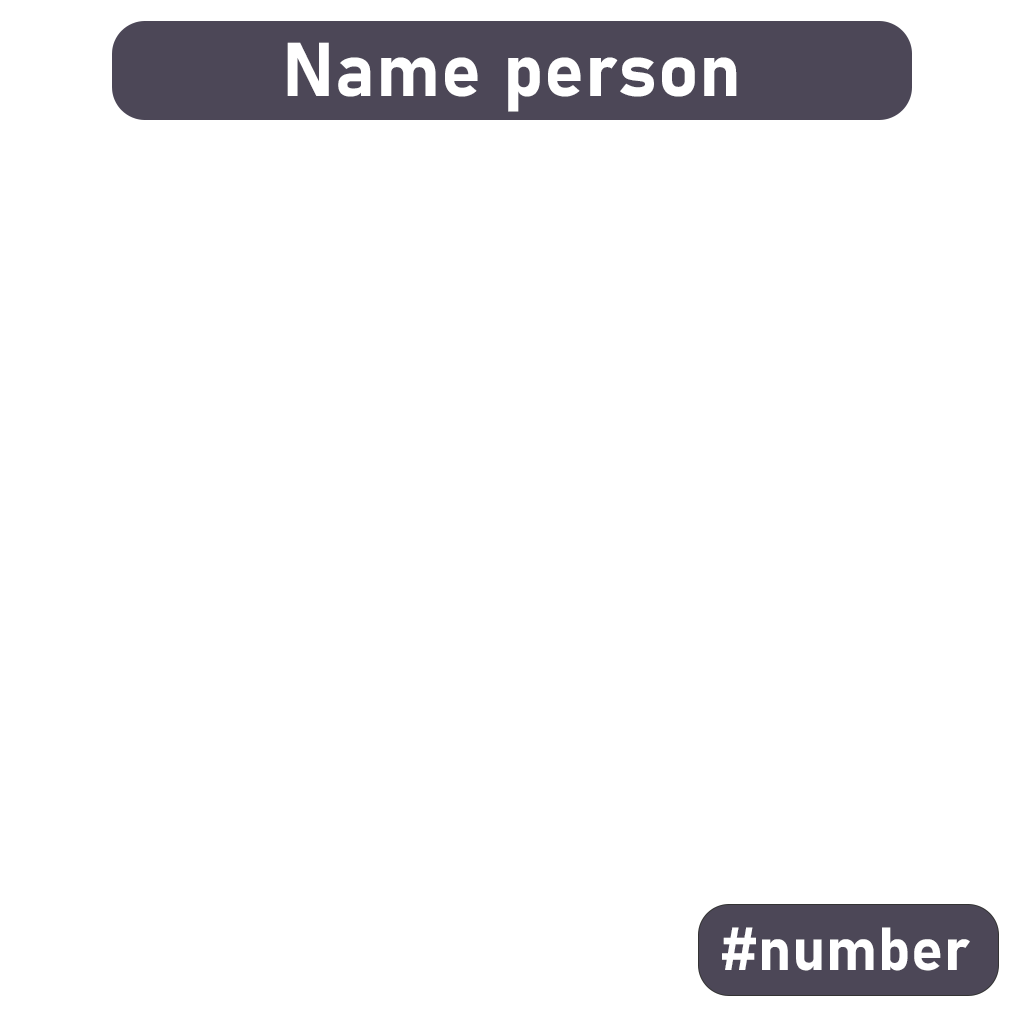
<style>
.page{position:relative;width:1024px;height:1024px;background:#ffffff}
.page>*{position:absolute;margin:0}
.t1{font:75px "Bahnschrift-Bold";letter-spacing:0.01em;color:#ffffff}
.t2{font:60px "Bahnschrift-Bold";letter-spacing:0.01em;color:#ffffff}
</style>
<div class="page">
<p class="t1" style="left:287px;top:42px;width:450px;height:70px">Name person</p>
<p class="t2" style="left:722px;top:927px;width:248px;height:44px">#number</p>
</div>
